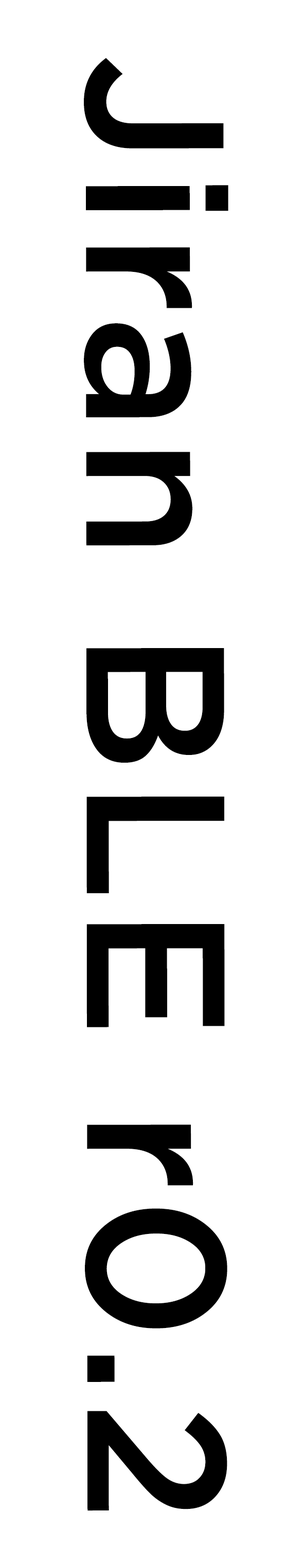
<style>
.page{position:relative;width:304px;height:1568px;background:#ffffff}
.page>*{position:absolute;margin:0}
.t1{font:196.3px "Gotham-Medium";letter-spacing:0.033em;color:#000000}
</style>
<div class="page">
<p class="t1" style="left:84px;top:58px;width:144px;height:1453px;rotate:90deg">Jiran BLE r0.2</p>
</div>
